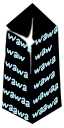
<style>
.page{position:relative;width:64px;height:128px;background:#000000}
.page>*{position:absolute;margin:0}
.t1{font:14.6px/14.6px "NanumPen";color:#c2f0ff;scale:0.94 1}
.t2{font:13.4px/13.4px "NanumPen";color:#c2f0ff;scale:1.05 1}
</style>
<div class="page">
<p class="t1" style="left:32px;top:26px;width:27px;height:92px;rotate:-33deg">Wawa<br>waw<br>wawa<br>wawa<br>wawaa<br>waawa</p>
<p class="t2" style="left:2px;top:33px;width:30px;height:88px;rotate:30deg">Wawa<br>waw<br>wawa<br>wawa<br>wawaa<br>waawa</p>
</div>
